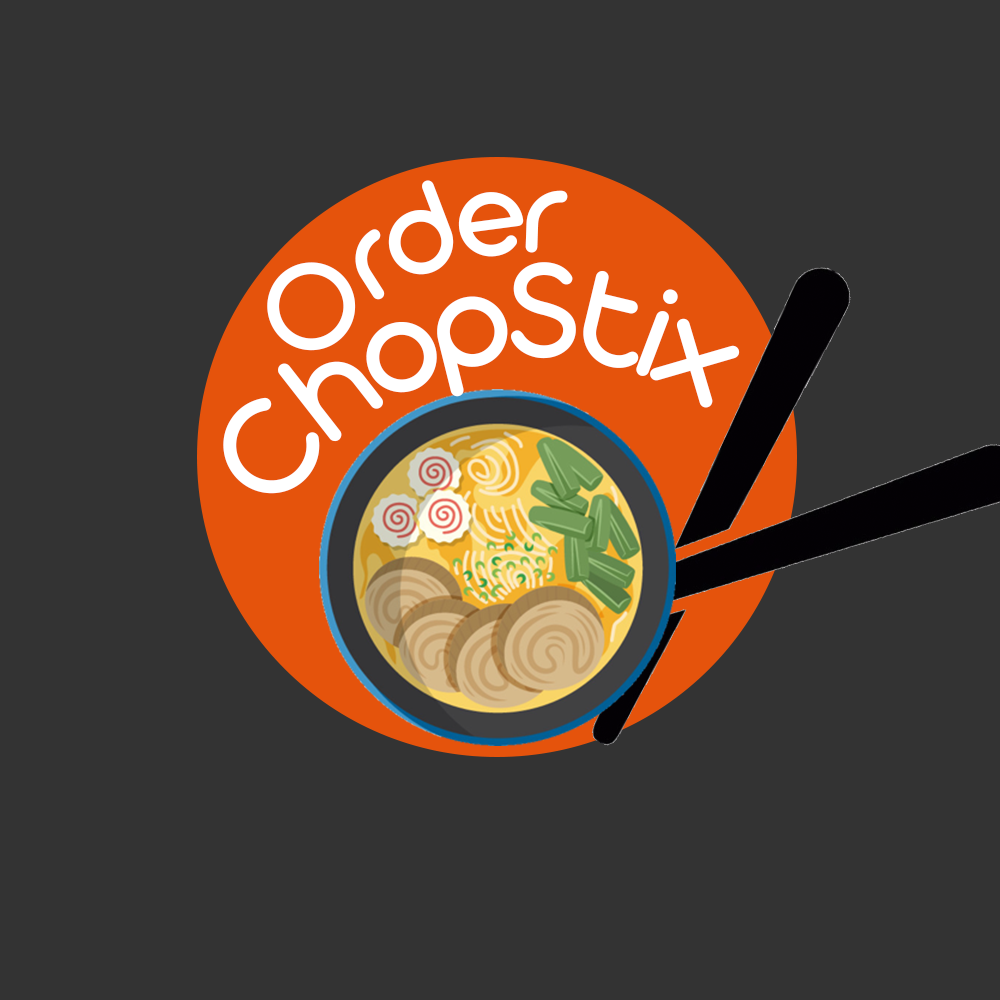
<style>
.page{position:relative;width:1000px;height:1000px;background:#333333}
.page>*{position:absolute;margin:0}
.t1{font:195.8px/137.4px "AristotelicaDisplay-Regular";letter-spacing:-0.08em;color:#ffffff}
.t2{font:134.7px/137.4px "AristotelicaDisplay-Regular";letter-spacing:-0.08em;color:#ffffff}
.t3{font:147.2px "AristotelicaDisplay-Regular";letter-spacing:-0.08em;color:#ffffff}
</style>
<div class="page">
<p class="t1" style="left:267px;top:180px;width:301px;height:171px"><span class="t2">Order<br></span>ChopStix</p>
<p class="t3" style="left:223px;top:262px;width:517px;height:232px">ChopStix</p>
</div>
